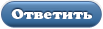
<style>
.page{position:relative;width:103px;height:29px}
.page>*{position:absolute;margin:0}
.t1{font:14px "AGCooper";color:#ffffff;scale:1.1 1}
</style>
<div class="page">
<p class="t1" style="left:11px;top:9px;width:81px;height:10px">Ответить</p>
</div>
